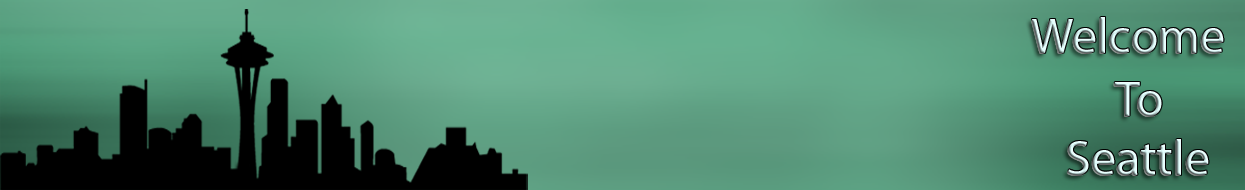
<style>
.page{position:relative;width:1245px;height:190px}
.page>*{position:absolute;margin:0}
.t1{font:50px "MyriadPro-Regular"}
</style>
<div class="page">
<p class="t1" style="left:1031px;top:17px;width:193px;height:36px">Welcome</p>
<p class="t1" style="left:1114px;top:82px;width:48px;height:34px">To</p>
<p class="t1" style="left:1067px;top:139px;width:142px;height:36px">Seattle</p>
</div>
